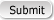
<style>
.page{position:relative;width:54px;height:20px}
.page>*{position:absolute;margin:0}
.t1{font:11px "Verdana";color:#000000;scale:0.9 1}
</style>
<div class="page">
<p class="t1" style="left:10px;top:5px;width:35px;height:10px">Submit</p>
</div>
